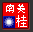
<style>
.page{position:relative;width:33px;height:32px;background:#f20000}
.page>*{position:absolute;margin:0}
.t1{font:10.4px "SimSun";color:#ffffff}
.t2{font:11.7px "SimSun";color:#ffffff}
</style>
<div class="page">
<p class="t1" style="left:6px;top:4px;width:19px;height:9px">南美</p>
<p class="t2" style="left:16px;top:15px;width:11px;height:12px">桂</p>
</div>
